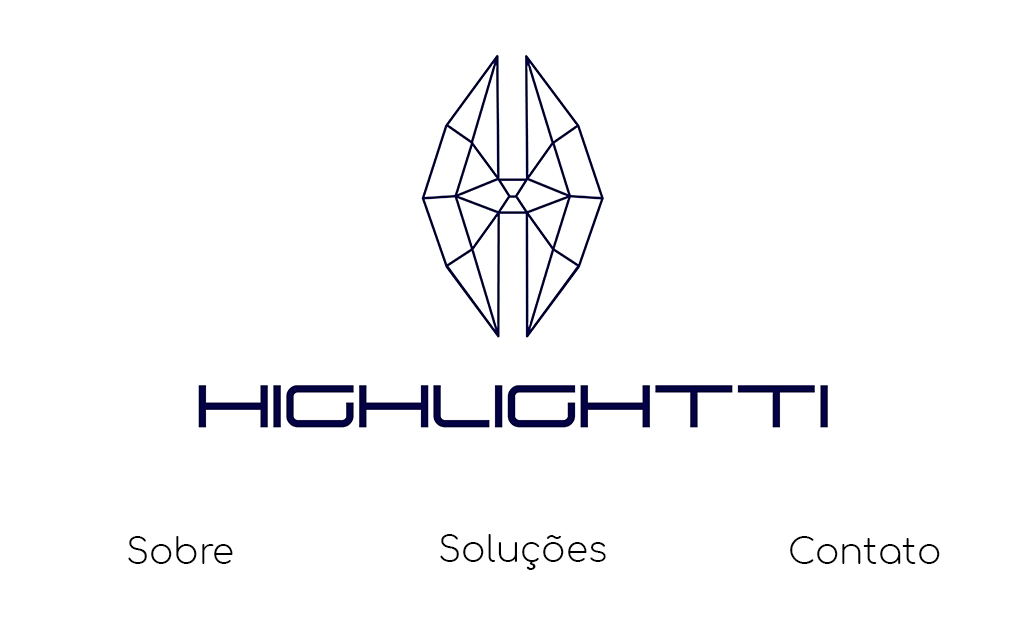
<style>
.page{position:relative;width:1024px;height:624px;background:#ffffff}
.page>*{position:absolute;margin:0}
.t1{font:36px "Comfortaa-Light";color:#000000}
</style>
<div class="page">
<p class="t1" style="left:440px;top:534px;width:166px;height:36px">Soluções</p>
<p class="t1" style="left:128px;top:536px;width:105px;height:28px">Sobre</p>
<p class="t1" style="left:790px;top:536px;width:150px;height:28px">Contato</p>
</div>
